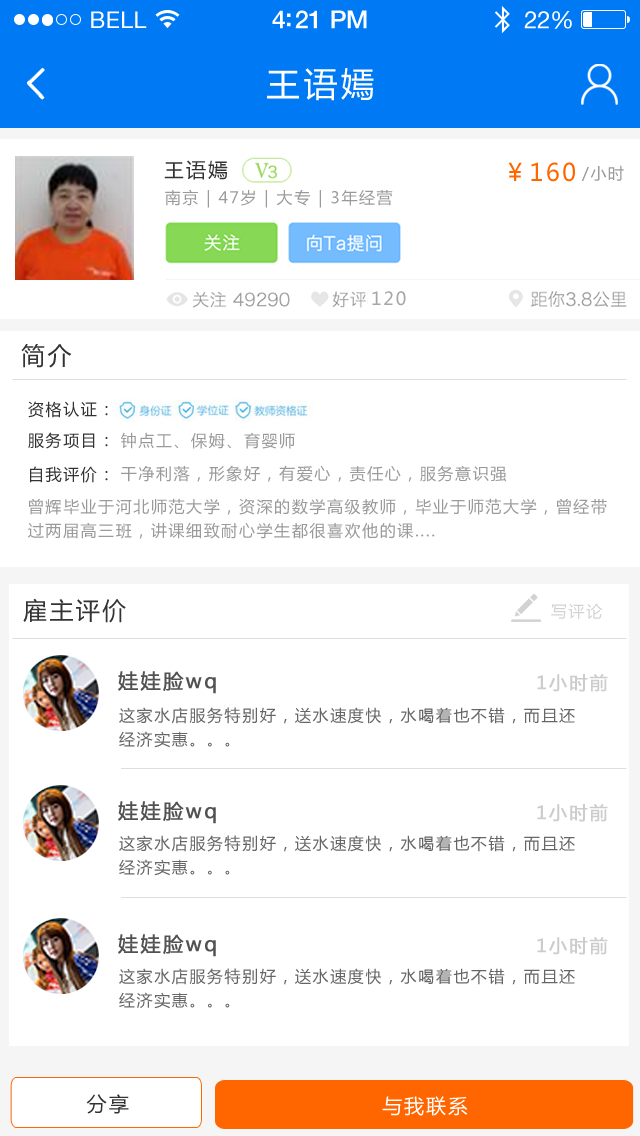
<style>
.page{position:relative;width:640px;height:1136px;background:#ffffff}
.page>*{position:absolute;margin:0}
.t1{font:23px "HelveticaNeue";letter-spacing:0.02em;color:#ffffff}
.t2{font:25px "HelveticaNeue-Medium";letter-spacing:-0.02em;color:#ffffff}
.t3{font:24px "HelveticaNeue";letter-spacing:-0.02em;color:#ffffff}
.t4{font:34px "MicrosoftYaHei";letter-spacing:0.1em;color:#ffffff}
.t5{font:20px "MicrosoftYaHei";letter-spacing:0.1em;color:#333333}
.t6{font:24px "MicrosoftYaHei";letter-spacing:0.1em;color:#ff6600}
.t7{font:16px "MicrosoftYaHei";letter-spacing:0.1em;color:#9a9a9a}
.t8{font:18px "MicrosoftYaHei";letter-spacing:0.1em;color:#a6a6a6}
.t9{font:24px "MicrosoftYaHei";letter-spacing:0.1em;color:#333333}
.t10{font:16px "MicrosoftYaHei";letter-spacing:0.1em;color:#333333}
.t11{font:16px/24px "MicrosoftYaHei";letter-spacing:0.1em;color:#9a9a9a}
.t12{font:20px "MicrosoftYaHei";letter-spacing:0.1em;color:#525252;font-weight:bold}
.t13{font:18px "MicrosoftYaHei";letter-spacing:0.1em;color:#cccccc;font-weight:bold}
.t14{font:16px/24px "MicrosoftYaHei";letter-spacing:0.1em;color:#666666}
.t15{font:20px "MicrosoftYaHei";letter-spacing:0.1em;color:#ffffff}
</style>
<div class="page">
<p class="t1" style="left:91px;top:11px;width:56px;height:17px">BELL</p>
<p class="t2" style="left:272px;top:10px;width:95px;height:19px">4:21 PM</p>
<p class="t3" style="left:524px;top:11px;width:48px;height:18px">22%</p>
<p class="t4" style="left:267px;top:68px;width:107px;height:33px">王语嫣</p>
<p class="t5" style="left:164px;top:160px;width:64px;height:20px">王语嫣</p>
<p class="t6" style="left:508px;top:162px;width:67px;height:20px">￥160</p>
<p class="t7" style="left:581px;top:165px;width:43px;height:16px">/小时</p>
<p class="t7" style="left:165px;top:189px;width:228px;height:19px">南京 | 47岁 | 大专 | 3年经营</p>
<p class="t8" style="left:372px;top:291px;width:34px;height:15px">120</p>
<p class="t9" style="left:21px;top:344px;width:51px;height:24px">简介</p>
<p class="t10" style="left:28px;top:401px;width:80px;height:17px">资格认证：</p>
<p class="t10" style="left:28px;top:432px;width:80px;height:17px">服务项目：</p>
<p class="t7" style="left:121px;top:432px;width:174px;height:17px">钟点工、保姆、育婴师</p>
<p class="t10" style="left:30px;top:466px;width:78px;height:17px">自我评价：</p>
<p class="t7" style="left:121px;top:465px;width:386px;height:17px">干净利落，形象好，有爱心，责任心，服务意识强</p>
<p class="t11" style="left:28px;top:498px;width:579px;height:41px">曾辉毕业于河北师范大学，资深的数学高级教师，毕业于师范大学，曾经带<br>过两届高三班，讲课细致耐心学生都很喜欢他的课....</p>
<p class="t9" style="left:23px;top:598px;width:103px;height:25px">雇主评价</p>
<p class="t12" style="left:118px;top:671px;width:98px;height:23px">娃娃脸wq</p>
<p class="t13" style="left:537px;top:674px;width:71px;height:18px">1小时前</p>
<p class="t14" style="left:119px;top:707px;width:456px;height:41px">这家水店服务特别好，送水速度快，水喝着也不错，而且还<br>经济实惠。。。</p>
<p class="t12" style="left:118px;top:801px;width:98px;height:23px">娃娃脸wq</p>
<p class="t13" style="left:537px;top:804px;width:71px;height:18px">1小时前</p>
<p class="t14" style="left:119px;top:835px;width:456px;height:41px">这家水店服务特别好，送水速度快，水喝着也不错，而且还<br>经济实惠。。。</p>
<p class="t12" style="left:118px;top:934px;width:98px;height:23px">娃娃脸wq</p>
<p class="t13" style="left:537px;top:937px;width:71px;height:18px">1小时前</p>
<p class="t14" style="left:119px;top:968px;width:456px;height:41px">这家水店服务特别好，送水速度快，水喝着也不错，而且还<br>经济实惠。。。</p>
<p class="t5" style="left:86px;top:1094px;width:43px;height:20px">分享</p>
<p class="t15" style="left:382px;top:1096px;width:86px;height:20px">与我联系</p>
</div>
